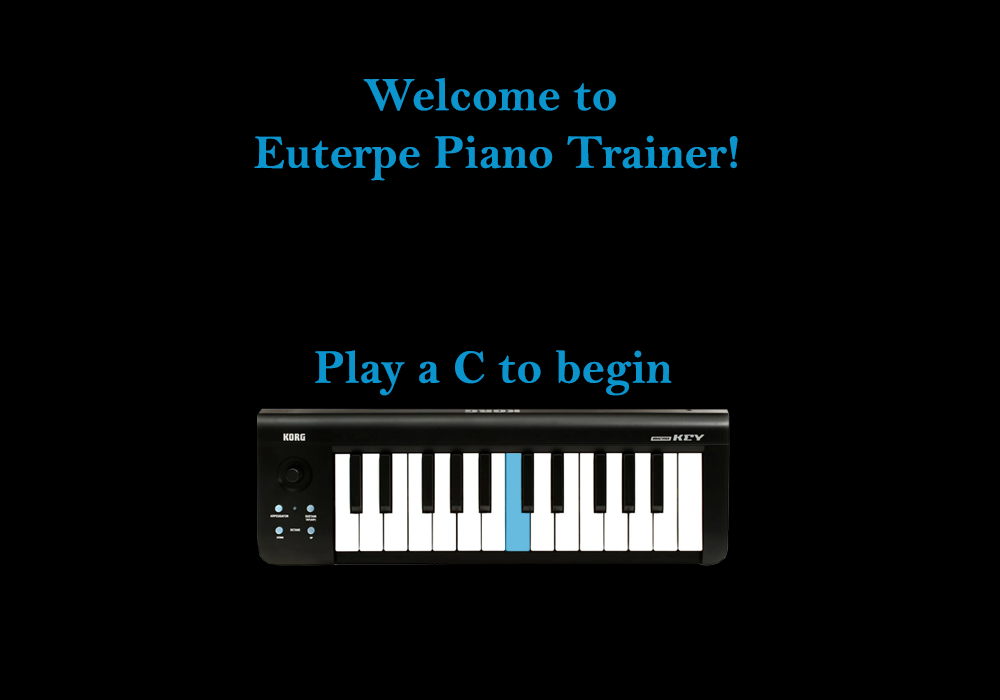
<style>
.page{position:relative;width:1000px;height:700px;background:#000000}
.page>*{position:absolute;margin:0}
.t1{font:48px "BellMTBold";color:#0c94cd}
</style>
<div class="page">
<p class="t1" style="left:254px;top:77px;width:484px;height:104px;text-align:center">Welcome to <br>Euterpe Piano Trainer!</p>
<p class="t1" style="left:315px;top:350px;width:357px;height:46px">Play a C to begin</p>
</div>
